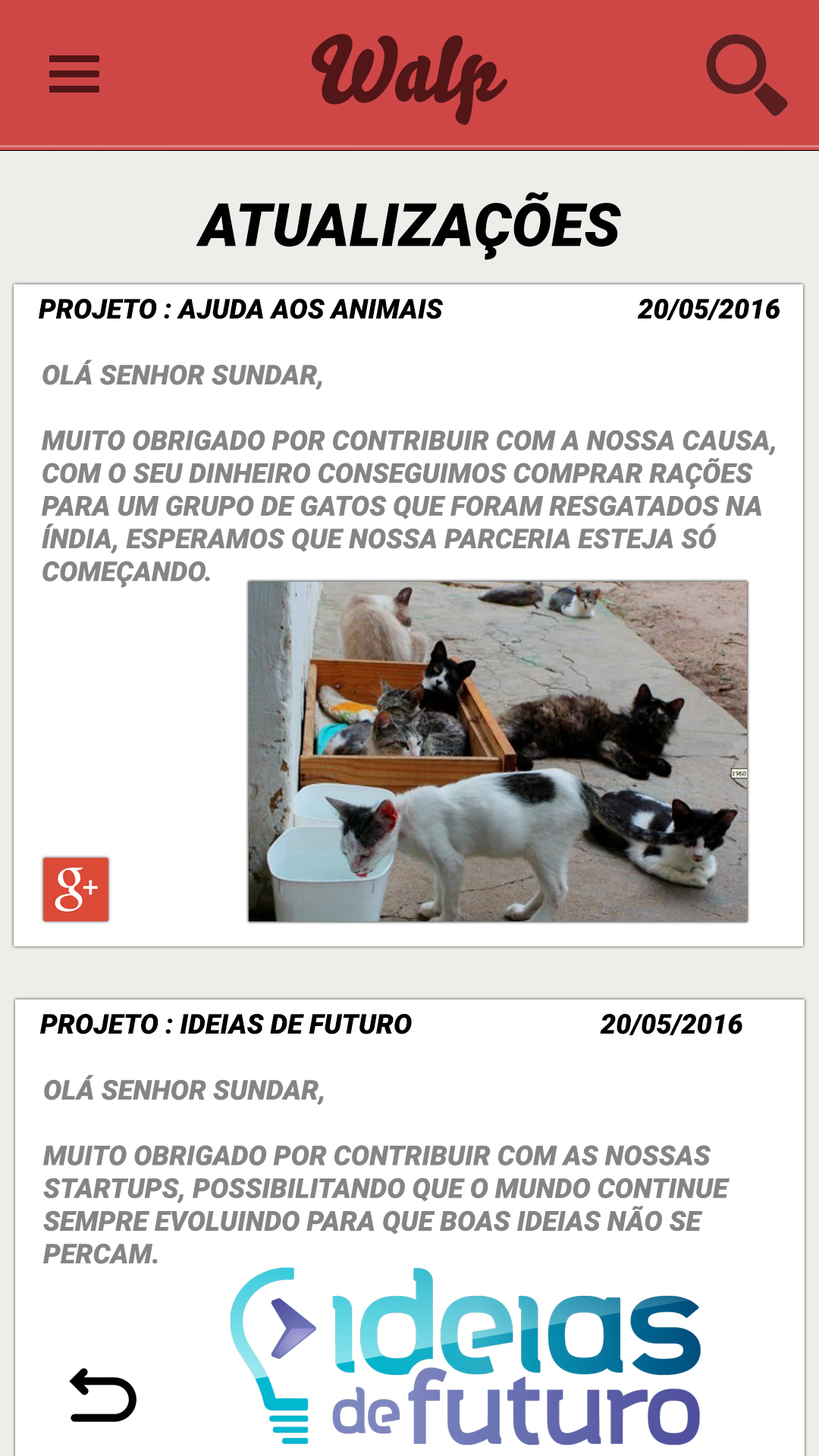
<style>
.page{position:relative;width:819px;height:1456px;background:#ffffff}
.page>*{position:absolute;margin:0}
.t1{font:90.5px "Bello-Pro";color:#521617}
.t2{font:59.6px "Roboto-BlackItalic";color:#000000}
.t3{font:27.3px "Roboto-BlackItalic";color:#000000}
.t4{font:27.3px "Roboto-BlackItalic";color:#858585}
</style>
<div class="page">
<p class="t1" style="left:311px;top:33px;width:196px;height:92px">Walp</p>
<p class="t2" style="left:196px;top:192px;width:425px;height:68px">ATUALIZAÇÕES</p>
<p class="t3" style="left:39px;top:299px;width:741px;height:22px">PROJETO : AJUDA AOS ANIMAIS                             20/05/2016</p>
<p class="t4" style="left:42px;top:359px;width:733px;height:229px">OLÁ SENHOR SUNDAR,<br><br>MUITO OBRIGADO POR CONTRIBUIR COM A NOSSA CAUSA, COM O SEU DINHEIRO CONSEGUIMOS COMPRAR RAÇÕES PARA UM GRUPO DE GATOS QUE FORAM RESGATADOS NA ÍNDIA, ESPERAMOS QUE NOSSA PARCERIA ESTEJA SÓ COMEÇANDO.</p>
<p class="t3" style="left:40px;top:1014px;width:702px;height:22px">PROJETO : IDEIAS DE FUTURO                            20/05/2016</p>
<p class="t4" style="left:43px;top:1075px;width:687px;height:189px">OLÁ SENHOR SUNDAR,<br><br>MUITO OBRIGADO POR CONTRIBUIR COM AS NOSSAS STARTUPS, POSSIBILITANDO QUE O MUNDO CONTINUE SEMPRE EVOLUINDO PARA QUE BOAS IDEIAS NÃO SE PERCAM.</p>
</div>
